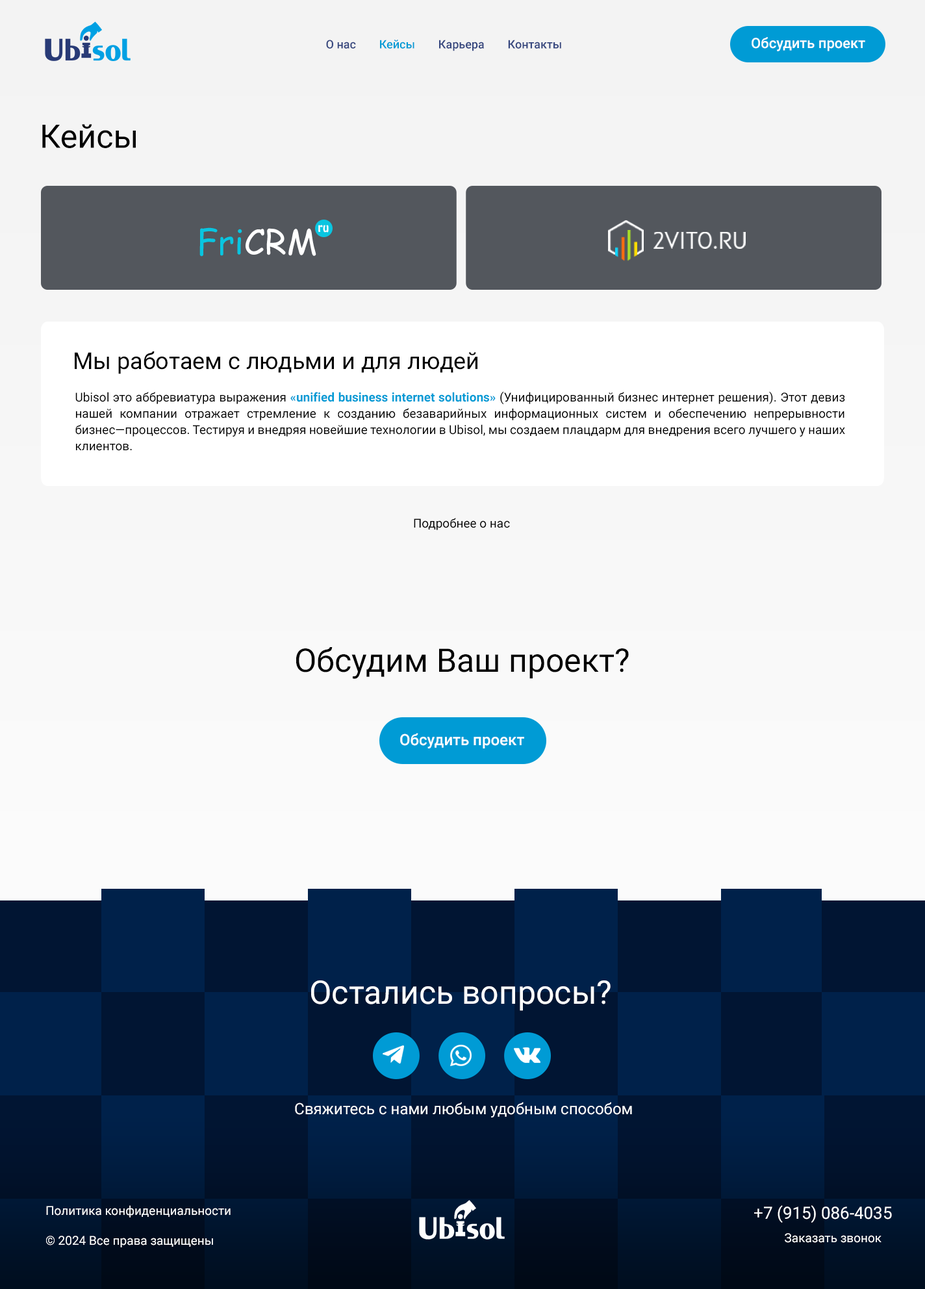
<style>
.page{position:relative;width:925px;height:1289px}
.page>*{position:absolute;margin:0}
.t1{font:11.7px "Roboto-Medium";color:#36477f}
.t2{font:11.7px "Roboto-Medium";color:#009bd5}
.t3{font:14.3px "Roboto-Medium";color:#ffffff}
.t4{font:32.5px "Roboto-Regular";color:#000000}
.t5{font:23.4px "Roboto-Regular";color:#000000}
.t6{font:12.3px/16.2px "Roboto-Regular";color:#000000}
.t7{font:12.3px/16.2px "Roboto-Bold";color:#009bd5}
.t8{font:12.3px "Roboto-Regular";color:#000000}
.t9{font:15.6px "Roboto-Medium";color:#ffffff}
.t10{font:32.5px "Roboto-Regular";color:#ffffff}
.t11{font:15.6px "Roboto-Regular";color:#ffffff}
.t12{font:12.3px "Roboto-Regular";color:#ffffff}
.t13{font:16.9px "Roboto-Regular";color:#ffffff;text-transform:uppercase}
</style>
<div class="page">
<p class="t1" style="left:326px;top:40px;width:235px;height:11px">О нас        <span class="t2">Кейсы</span>        Карьера        Контакты</p>
<p class="t3" style="left:752px;top:37px;width:113px;height:14px">Обсудить проект</p>
<p class="t4" style="left:42px;top:124px;width:94px;height:24px">Кейсы</p>
<p class="t5" style="left:75px;top:351px;width:403px;height:23px">Мы работаем с людьми и для людей</p>
<p class="t6" style="left:75px;top:391px;width:770px;height:60px;text-align:justify">Ubisol это аббревиатура выражения <span class="t7">«unified business internet solutions» </span>(Унифицированный бизнес интернет решения). Этот девиз нашей компании отражает стремление к созданию безаварийных информационных систем и обеспечению непрерывности бизнес—процессов. Тестируя и внедряя новейшие технологии в Ubisol, мы создаем плацдарм для внедрения всего лучшего у наших клиентов.</p>
<p class="t8" style="left:414px;top:518px;width:96px;height:12px">Подробнее о нас</p>
<p class="t4" style="left:296px;top:647px;width:333px;height:32px">Обсудим Ваш проект?</p>
<p class="t9" style="left:400px;top:733px;width:124px;height:15px">Обсудить проект</p>
<p class="t10" style="left:311px;top:980px;width:300px;height:31px">Остались вопросы?</p>
<p class="t11" style="left:295px;top:1102px;width:337px;height:15px">Cвяжитесь с нами любым удобным способом</p>
<p class="t12" style="left:46px;top:1205px;width:185px;height:42px">Политика конфиденциальности<br><br>© 2024 Все права защищены</p>
<p class="t13" style="left:754px;top:1205px;width:138px;height:18px">+7 (915) 086-4035</p>
<p class="t12" style="left:785px;top:1233px;width:97px;height:10px">Заказать звонок</p>
</div>
